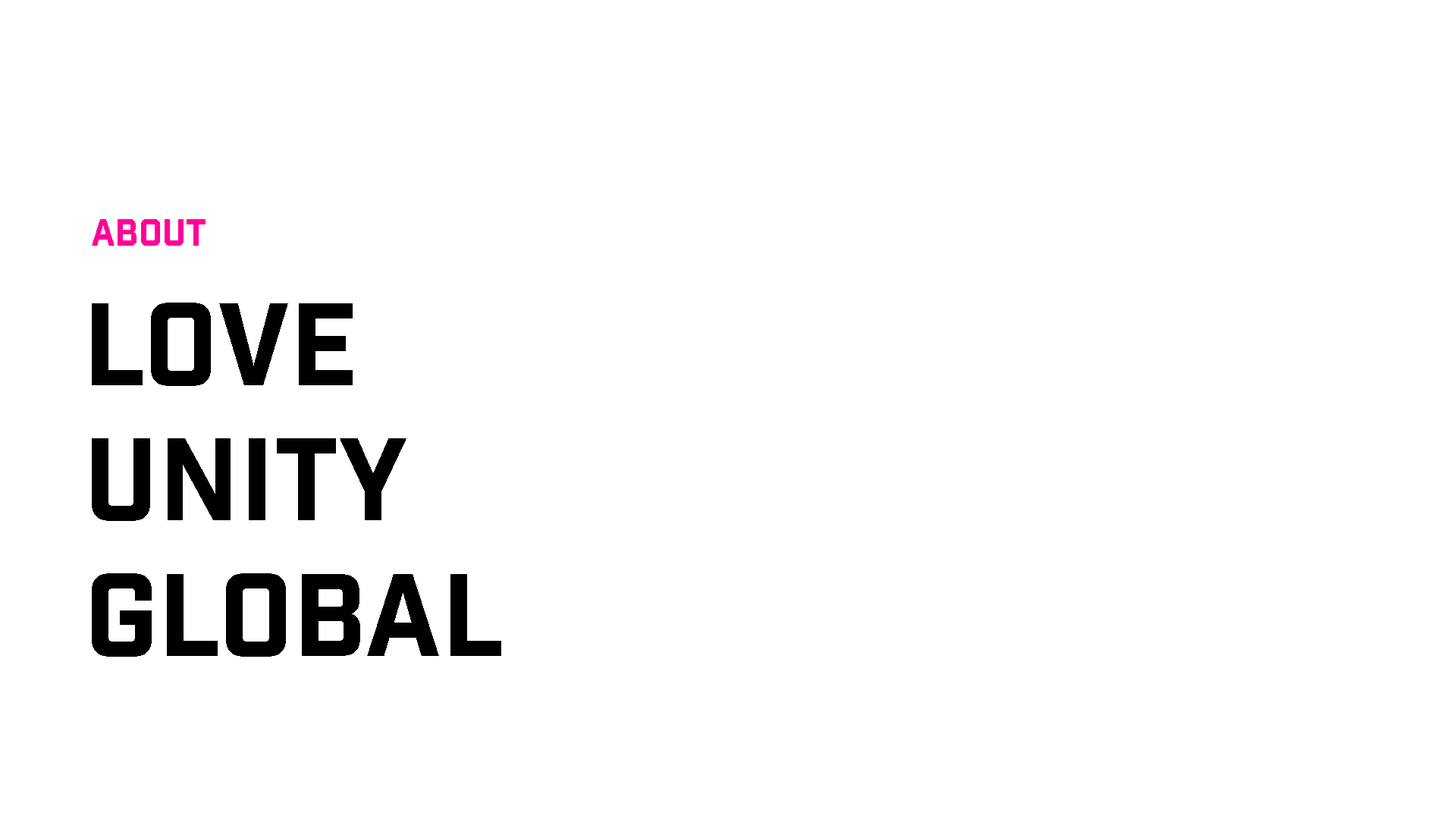
<style>
.page{position:relative;width:1456px;height:819px;background:#ffffff}
.page>*{position:absolute;margin:0}
.t1{font:36.4px "IndustryInc-Base";color:#ff0098}
.t2{font:113.7px "IndustryInc-Base";color:#000000}
</style>
<div class="page">
<p class="t1" style="left:92px;top:219px;width:114px;height:27px">ABOUT</p>
<p class="t2" style="left:92px;top:303px;width:261px;height:83px">LOVE</p>
<p class="t2" style="left:92px;top:438px;width:314px;height:83px">UNITY</p>
<p class="t2" style="left:92px;top:573px;width:409px;height:84px">GLOBAL</p>
</div>
